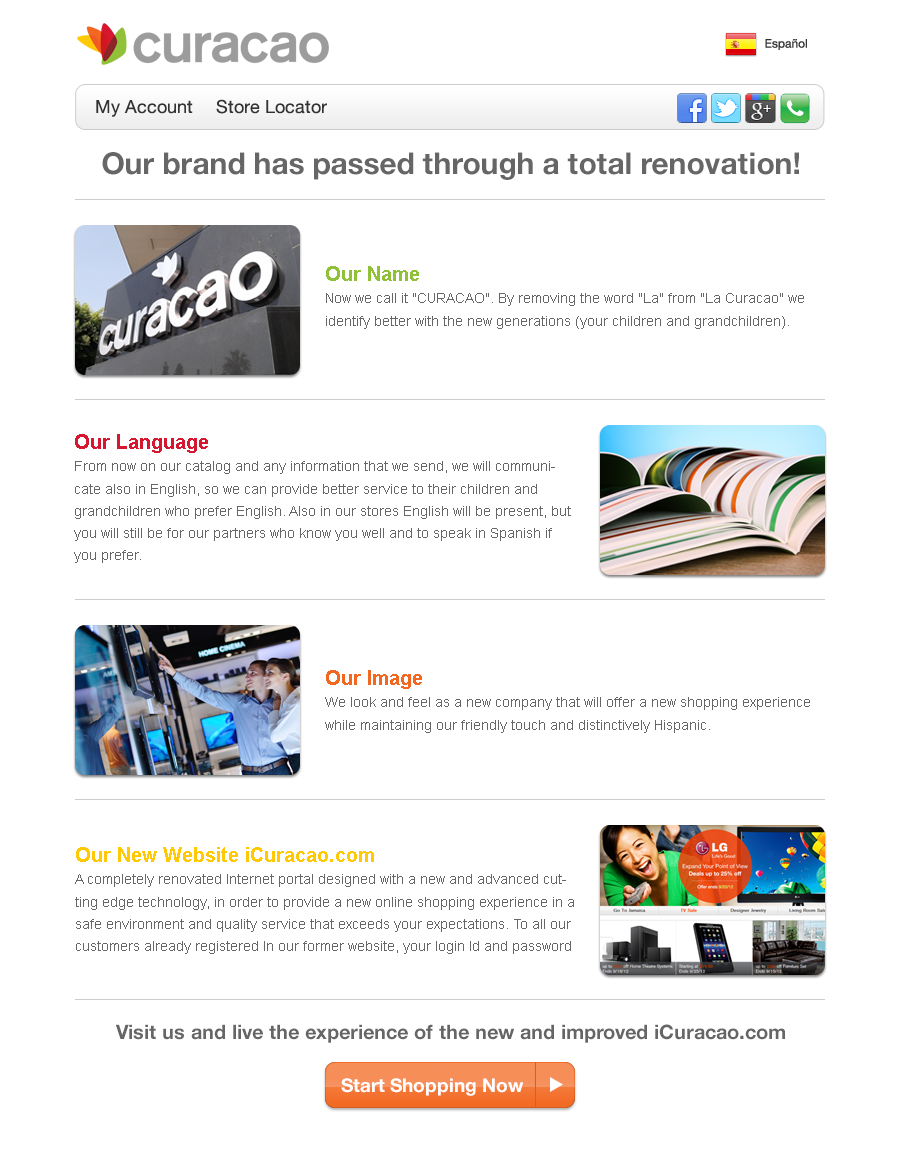
<style>
.page{position:relative;width:906px;height:1150px;background:#ffffff}
.page>*{position:absolute;margin:0}
.t1{font:18px "HelveticaNeue-Roman";color:#333333}
.t2{font:30px "HelveticaNeue-Bold";color:#666666}
.t3{font:14px/22.2px "ArialMT";color:#666666}
.t4{font:20px/22.2px "Arial-BoldMT";color:#91c039}
.t5{font:20px/22.2px "Arial-BoldMT";color:#d5172f}
.t6{font:20px/22.2px "Arial-BoldMT";color:#f26821}
.t7{font:20px/22.2px "Arial-BoldMT";color:#ffc906}
.t8{font:20px "HelveticaNeue-Bold";color:#666666}
.t9{font:19px "HelveticaNeue-Bold";color:#ffffff}
</style>
<div class="page">
<p class="t1" style="left:96px;top:100px;width:97px;height:17px">My Account</p>
<p class="t1" style="left:216px;top:99px;width:111px;height:15px">Store Locator</p>
<p class="t2" style="left:102px;top:152px;width:697px;height:28px">Our brand has passed through a total renovation!</p>
<p class="t3" style="left:326px;top:266px;width:478px;height:63px"><span class="t4">Our Name<br></span>Now we call it "CURACAO". By removing the word "La" from "La Curacao" we identify better with the new generations (your children and grandchildren).</p>
<p class="t3" style="left:74px;top:434px;width:497px;height:129px"><span class="t5">Our Language<br></span>From now on our catalog and any information that we send, we will communicate also in English, so we can provide better service to their children and grandchildren who prefer English. Also in our stores English will be present, but you will still be for our partners who know you well and to speak in Spanish if you prefer.</p>
<p class="t3" style="left:325px;top:670px;width:485px;height:63px"><span class="t6">Our Image<br></span>We look and feel as a new company that will offer a new shopping experience while maintaining our friendly touch and distinctively Hispanic.</p>
<p class="t3" style="left:75px;top:847px;width:499px;height:107px"><span class="t7">Our New Website iCuracao.com<br></span>A completely renovated Internet portal designed with a new and advanced cutting edge technology, in order to provide a new online shopping experience in a safe environment and quality service that exceeds your expectations. To all our customers already registered In our former website, your login Id and password will remain the same.</p>
<p class="t8" style="left:115px;top:1024px;width:670px;height:19px">Visit us and live the experience of the new and improved iCuracao.com</p>
<p class="t9" style="left:341px;top:1078px;width:183px;height:18px">Start Shopping Now</p>
</div>
